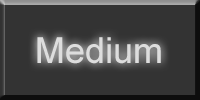
<style>
.page{position:relative;width:200px;height:100px;background:#333333}
.page>*{position:absolute;margin:0}
.t1{font:36px "ArialMT";color:#dddddd}
</style>
<div class="page">
<p class="t1" style="left:37px;top:37px;width:124px;height:27px">Medium</p>
</div>
